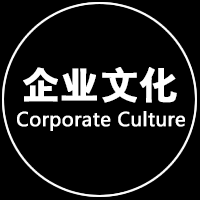
<style>
.page{position:relative;width:200px;height:200px;background:#000000}
.page>*{position:absolute;margin:0}
.t1{font:37.9px "HYb2gj";color:#ffffff;font-weight:bold}
.t2{font:18.8px "MicrosoftYaHei";color:#ffffff;font-weight:bold}
</style>
<div class="page">
<p class="t1" style="left:23px;top:67px;width:154px;height:36px">企业文化</p>
<p class="t2" style="left:17px;top:111px;width:168px;height:20px">Corporate Culture</p>
</div>
